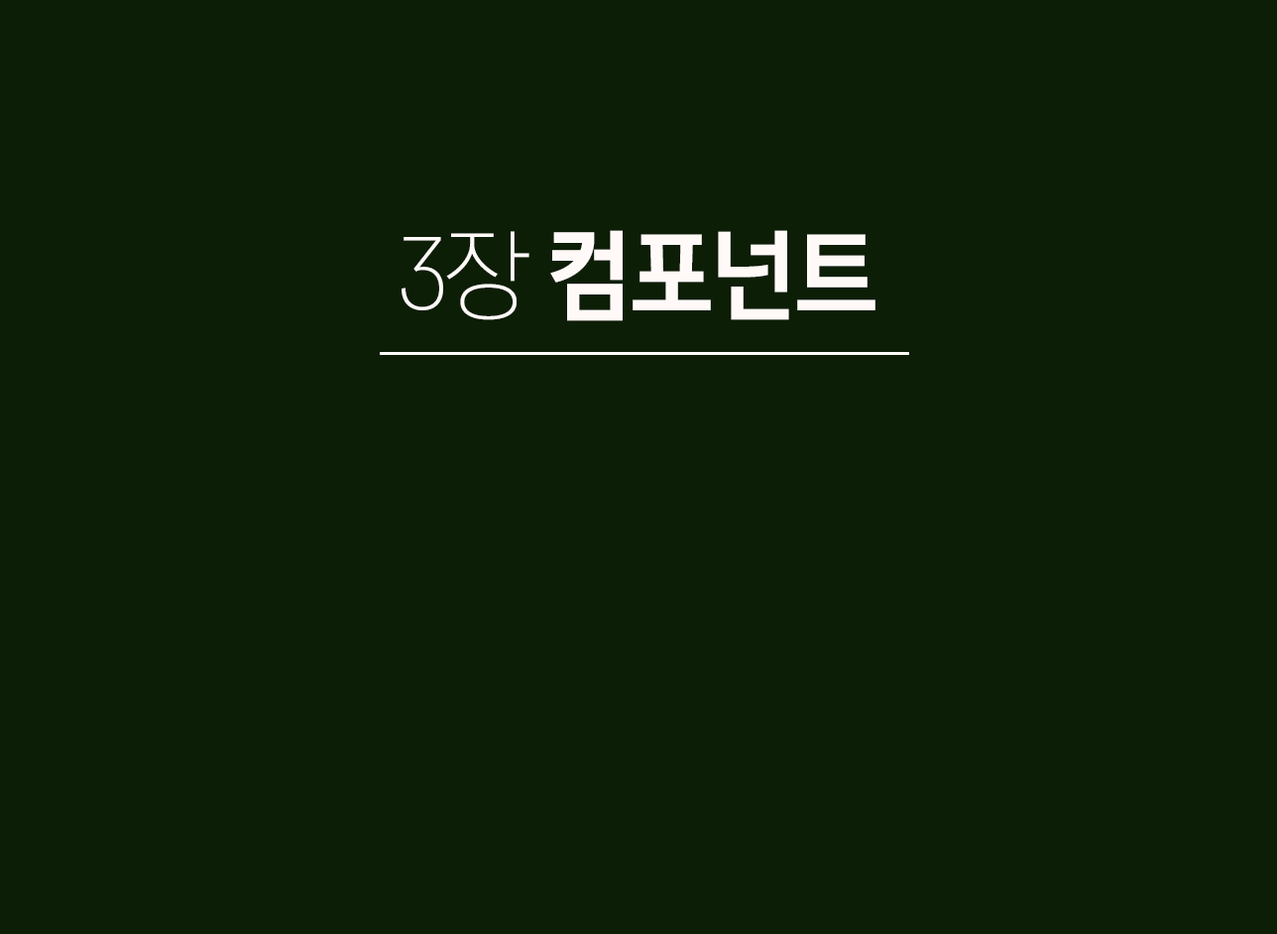
<style>
.page{position:relative;width:1277px;height:934px;background:#0d1e06}
.page>*{position:absolute;margin:0}
.t1{font:97.5px "CoreGothicD-6Bold";letter-spacing:-0.075em;color:#fffaf8}
.t2{font:97.5px "CoreGothicD-2ExtraLight";letter-spacing:-0.075em;color:#fffaf8}
</style>
<div class="page">
<p class="t1" style="left:402px;top:230px;width:473px;height:91px"><span class="t2">3장 </span>컴포넌트</p>
</div>
